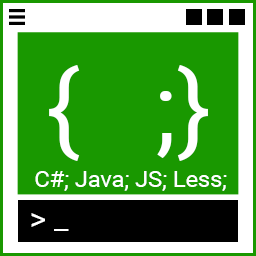
<style>
.page{position:relative;width:256px;height:256px;background:#199800}
.page>*{position:absolute;margin:0}
.t1{font:99.6px "Roboto-Regular";color:#ffffff}
.t2{font:23.1px "Roboto-Regular";color:#ffffff}
.t3{font:31.2px "Roboto-Regular";color:#ffffff}
</style>
<div class="page">
<p class="t1" style="left:49px;top:65px;width:159px;height:96px">{   ;}</p>
<p class="t2" style="left:35px;top:171px;width:192px;height:20px">C#; Java; JS; Less;</p>
<p class="t3" style="left:31px;top:213px;width:38px;height:18px">&gt; _</p>
</div>
